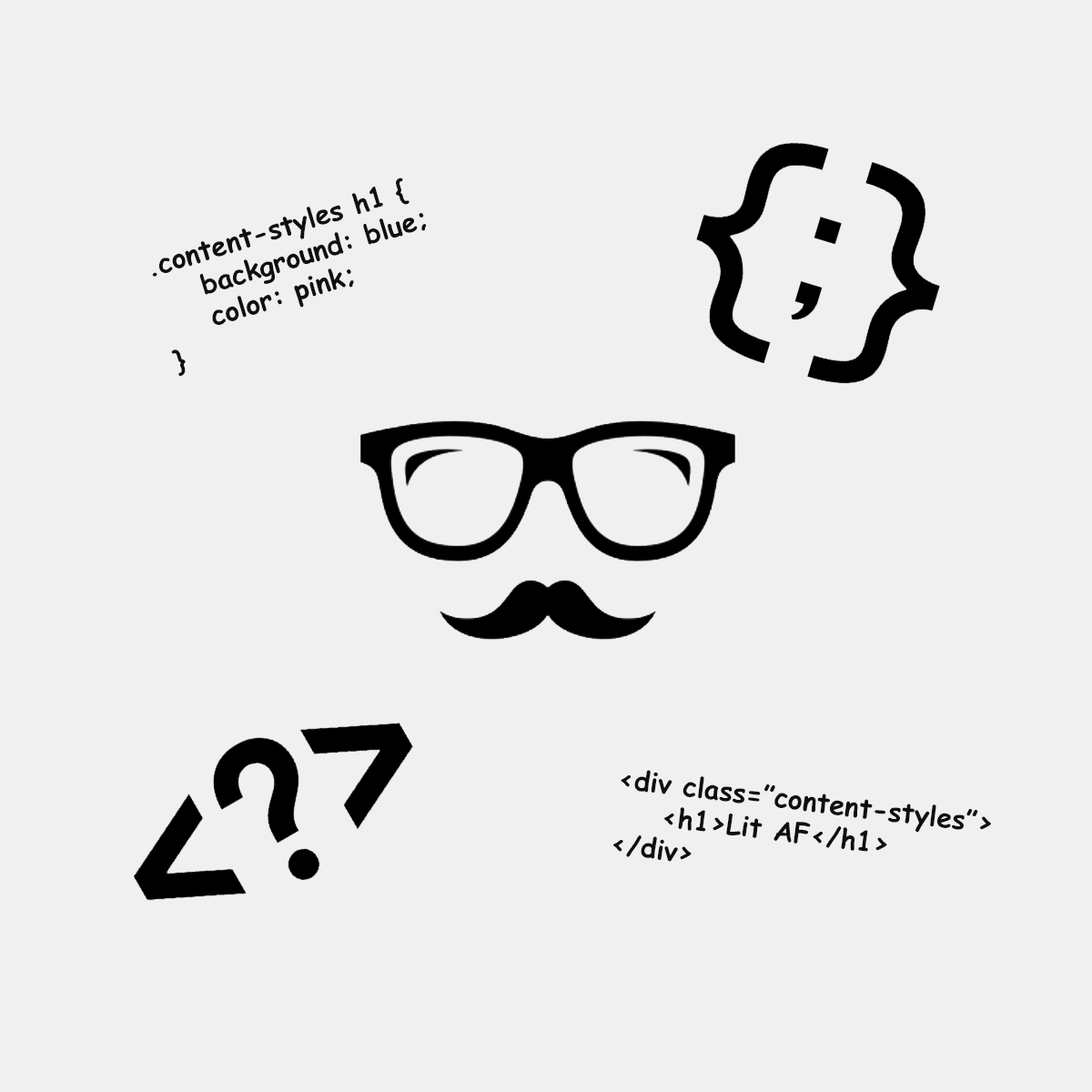
<style>
.page{position:relative;width:1092px;height:1092px;background:#f0f0f0}
.page>*{position:absolute;margin:0}
.t1{font:27.3px "ComicSansMS-Bold";color:#0f0f0f}
</style>
<div class="page">
<p class="t1" style="left:152px;top:177px;width:275px;height:199px;rotate:-17deg">.content-styles h1 {<br>    background: blue;<br>    color: pink;<br>}</p>
<p class="t1" style="left:613px;top:770px;width:378px;height:92px;rotate:7deg">&lt;div class=”content-styles”&gt;<br>    &lt;h1&gt;Lit AF&lt;/h1&gt;<br>&lt;/div&gt;</p>
</div>
